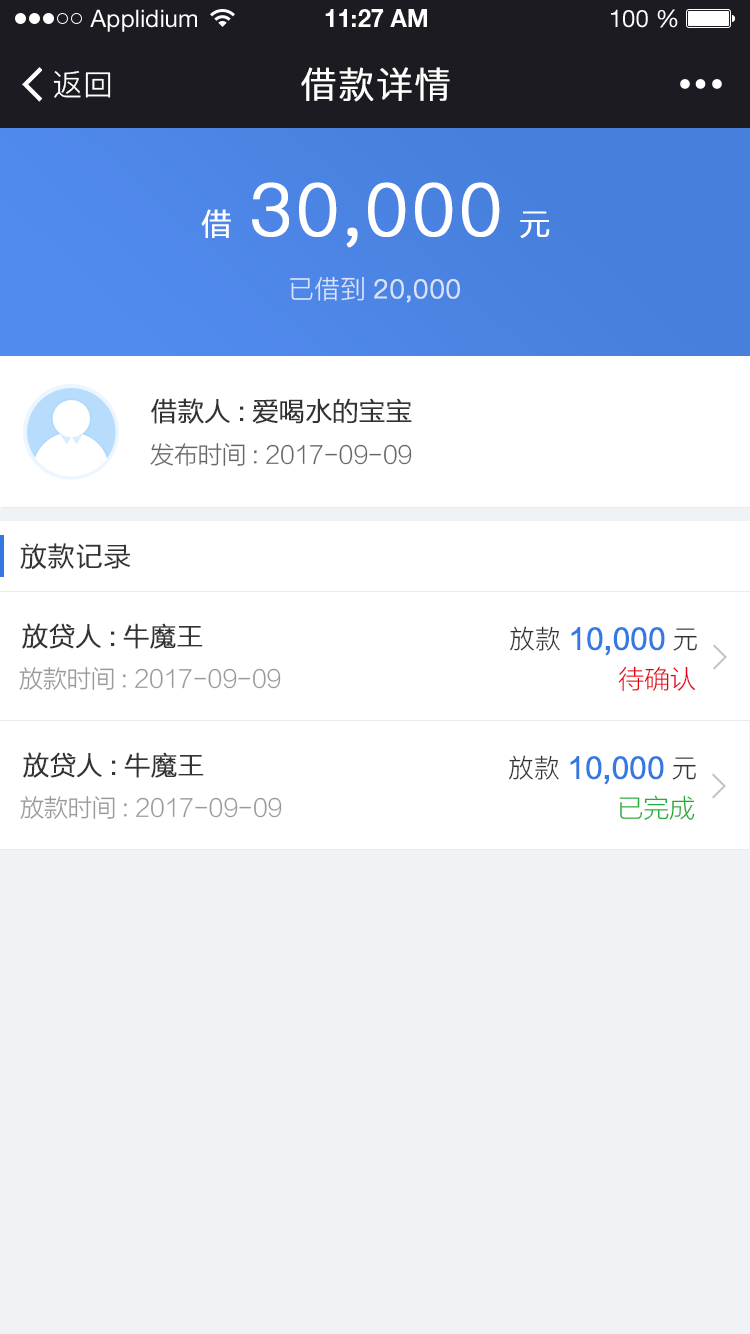
<style>
.page{position:relative;width:750px;height:1334px;background:#eff3f6}
.page>*{position:absolute;margin:0}
.t1{font:24px "HelveticaNeueLTStd-Roman";color:#ffffff}
.t2{font:24px "HelveticaNeueLTStd-Bd";color:#ffffff}
.t3{font:30px "PingFang-SC-Regular";letter-spacing:0.025em;color:#ffffff}
.t4{font:36px "PingFang-SC-Regular";letter-spacing:0.025em;color:#ffffff;font-weight:bold}
.t5{font:72px "PingFang-SC-Regular";letter-spacing:0.025em;color:#ffffff;font-weight:bold}
.t6{font:30px "FZLTXHK--GBK1-0";letter-spacing:0.025em;color:#ffffff;font-weight:bold}
.t7{font:26px "PingFang-SC-Regular";color:#dae3f8;font-weight:bold}
.t8{font:26px "PingFang-SC-Regular";color:#dae3f8}
.t9{font:26px "FZLTXHK--GBK1-0";color:#333333;font-weight:bold}
.t10{font:24px "FZLTXHK--GBK1-0";color:#666666}
.t11{font:28px "FZLTH_YS_GBK";color:#333333}
.t12{font:28px "FZLTH_YS_GB18030";color:#3479e1;font-weight:bold}
.t13{font:26px "PingFang-SC-Regular";color:#333333}
.t14{font:24px "FZLTXHK--GBK1-0";color:#999999}
.t15{font:26px "FZLTXHK--GBK1-0";color:#e60012}
.t16{font:26px "FZLTXHK--GBK1-0";color:#22ac38}
</style>
<div class="page">
<p class="t1" style="left:90px;top:9px;width:107px;height:23px">Applidium</p>
<p class="t2" style="left:325px;top:9px;width:102px;height:18px">11:27 AM</p>
<p class="t1" style="left:611px;top:9px;width:67px;height:19px">100 %</p>
<p class="t3" style="left:53px;top:71px;width:58px;height:27px">返回</p>
<p class="t4" style="left:301px;top:67px;width:149px;height:35px">借款详情</p>
<p class="t5" style="left:252px;top:182px;width:248px;height:66px">30,000</p>
<p class="t6" style="left:201px;top:209px;width:30px;height:29px">借</p>
<p class="t6" style="left:520px;top:211px;width:30px;height:27px">元</p>
<p class="t7" style="left:290px;top:276px;width:170px;height:27px"><span class="t8">已借到</span>20,000</p>
<p class="t9" style="left:151px;top:398px;width:261px;height:26px">借款人:爱喝水的宝宝</p>
<p class="t10" style="left:150px;top:443px;width:262px;height:23px">发布时间: 2017-09-09</p>
<p class="t11" style="left:20px;top:543px;width:111px;height:27px">放款记录</p>
<p class="t9" style="left:22px;top:623px;width:181px;height:26px">放贷人:牛魔王</p>
<p class="t12" style="left:510px;top:626px;width:187px;height:30px"><span class="t13">放款</span>10,000<span class="t13">元</span></p>
<p class="t14" style="left:19px;top:667px;width:262px;height:23px">放款时间: 2017-09-09</p>
<p class="t15" style="left:618px;top:666px;width:78px;height:25px">待确认</p>
<p class="t9" style="left:23px;top:752px;width:181px;height:26px">放贷人:牛魔王</p>
<p class="t12" style="left:509px;top:755px;width:187px;height:30px"><span class="t13">放款</span>10,000<span class="t13">元</span></p>
<p class="t14" style="left:20px;top:796px;width:262px;height:23px">放款时间: 2017-09-09</p>
<p class="t16" style="left:619px;top:795px;width:76px;height:25px">已完成</p>
</div>
